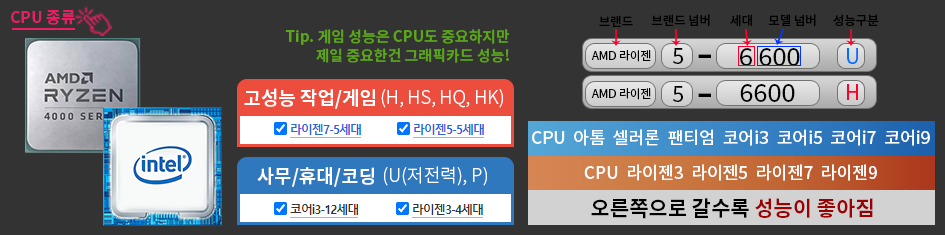
<style>
.page{position:relative;width:945px;height:235px;background:#333333}
.page>*{position:absolute;margin:0}
.t1{font:15.8px "NotoSansKR-Bold";color:#e91e63}
.t2{font:12.4px "NotoSansKR-Medium";color:#000000}
.t3{font:14.9px/18.7px "NotoSansKR-Bold";color:#5aa71a}
.t4{font:11.7px "NotoSansKR-Regular";color:#000000}
.t5{font:21.5px "NotoSansKR-Regular";color:#000000}
.t6{font:49.3px "NotoSansKR-Regular";color:#000000}
.t7{font:25.2px "NotoSansKR-Regular";color:#000000}
.t8{font:20.8px "NotoSansKR-Regular";color:#006eff}
.t9{font:18.9px "NotoSansKR-Bold";color:#ffffff}
.t10{font:18.2px "NotoSansKR-Light";color:#ffffff}
.t11{font:20.8px "NotoSansKR-Regular";color:#ff002a}
.t12{font:17.1px "NotoSansKR-Medium";color:#ffffff}
.t13{font:20.9px "NotoSansKR-Bold";color:#000000}
.t14{font:20.9px "NotoSansKR-Bold";color:#9c0000}
</style>
<div class="page">
<p class="t1" style="left:11px;top:10px;width:64px;height:15px">CPU 종류</p>
<p class="t2" style="left:599px;top:15px;width:34px;height:12px">브랜드</p>
<p class="t2" style="left:651px;top:14px;width:59px;height:12px">브랜드 넘버</p>
<p class="t2" style="left:730px;top:14px;width:22px;height:13px">세대</p>
<p class="t2" style="left:768px;top:14px;width:48px;height:12px">모델 넘버</p>
<p class="t2" style="left:833px;top:14px;width:46px;height:12px">성능구분</p>
<p class="t3" style="left:285px;top:29px;width:225px;height:34px;text-align:right">Tip. 게임 성능은 CPU도 중요하지만<br>제일 중요한건 그래픽카드 성능!</p>
<p class="t4" style="left:591px;top:50px;width:60px;height:12px">AMD 라이젠</p>
<p class="t5" style="left:672px;top:48px;width:11px;height:16px">5</p>
<p class="t6" style="left:698px;top:54px;width:13px;height:4px">-</p>
<p class="t7" style="left:740px;top:48px;width:60px;height:18px">6 600</p>
<p class="t8" style="left:847px;top:48px;width:11px;height:16px">U</p>
<p class="t9" style="left:244px;top:88px;width:131px;height:21px">고성능 작업/게임</p>
<p class="t10" style="left:381px;top:89px;width:122px;height:19px">(H, HS, HQ, HK)</p>
<p class="t4" style="left:591px;top:88px;width:60px;height:12px">AMD 라이젠</p>
<p class="t5" style="left:672px;top:86px;width:11px;height:16px">5</p>
<p class="t7" style="left:740px;top:84px;width:55px;height:18px">6600</p>
<p class="t11" style="left:847px;top:84px;width:11px;height:16px">H</p>
<p class="t6" style="left:698px;top:93px;width:13px;height:4px">-</p>
<p class="t12" style="left:532px;top:129px;width:398px;height:17px">CPU  아톰  셀러론  팬티엄  코어i3  코어i5  코어i7  코어i9</p>
<p class="t9" style="left:257px;top:167px;width:117px;height:20px">사무/휴대/코딩</p>
<p class="t10" style="left:384px;top:166px;width:103px;height:20px">(U(저전력), P)</p>
<p class="t12" style="left:584px;top:164px;width:293px;height:17px">CPU  라이젠3  라이젠5  라이젠7  라이젠9</p>
<p class="t13" style="left:591px;top:198px;width:282px;height:21px">오른쪽으로 갈수록 <span class="t14">성능이 좋아짐</span></p>
</div>
